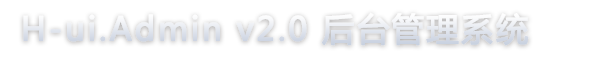
<style>
.page{position:relative;width:600px;height:60px;background:#ffffff}
.page>*{position:absolute;margin:0}
.t1{font:32px "MicrosoftYaHei";letter-spacing:0.06em;color:#e1e6ee;font-weight:bold}
</style>
<div class="page">
<p class="t1" style="left:23px;top:12px;width:506px;height:34px">H-ui.Admin v2.0 后台管理系统</p>
</div>
